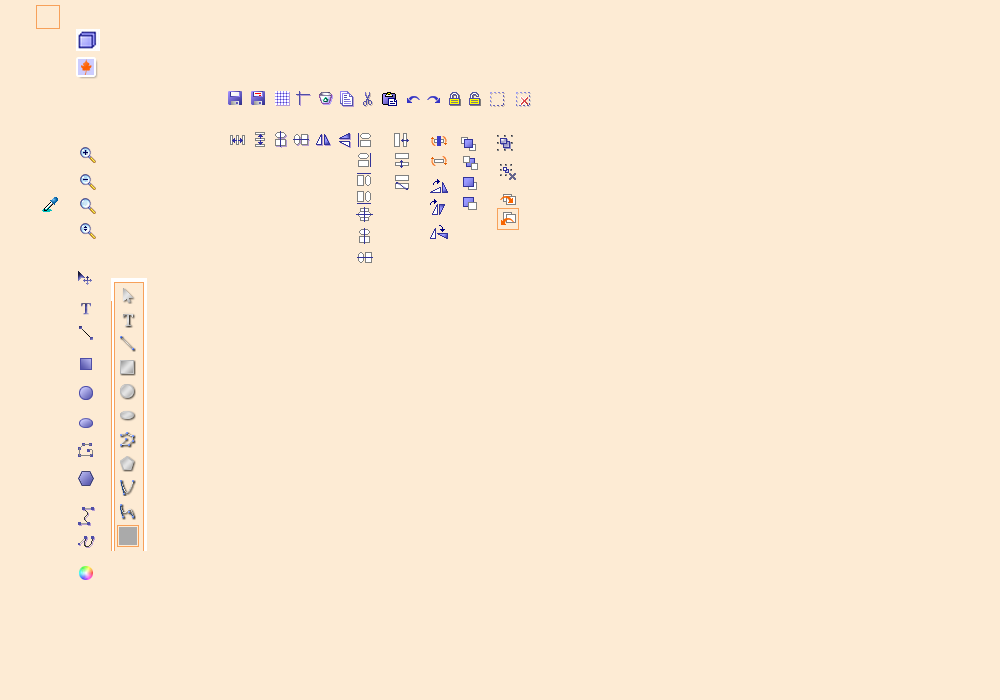
<style>
.page{position:relative;width:1000px;height:700px;background:#fdebd4}
.page>*{position:absolute;margin:0}
.t1{font:16px "Romantic";letter-spacing:0.05em;font-weight:bold}
</style>
<div class="page">
<p class="t1" style="left:81px;top:303px;width:10px;height:12px">T</p>
</div>
